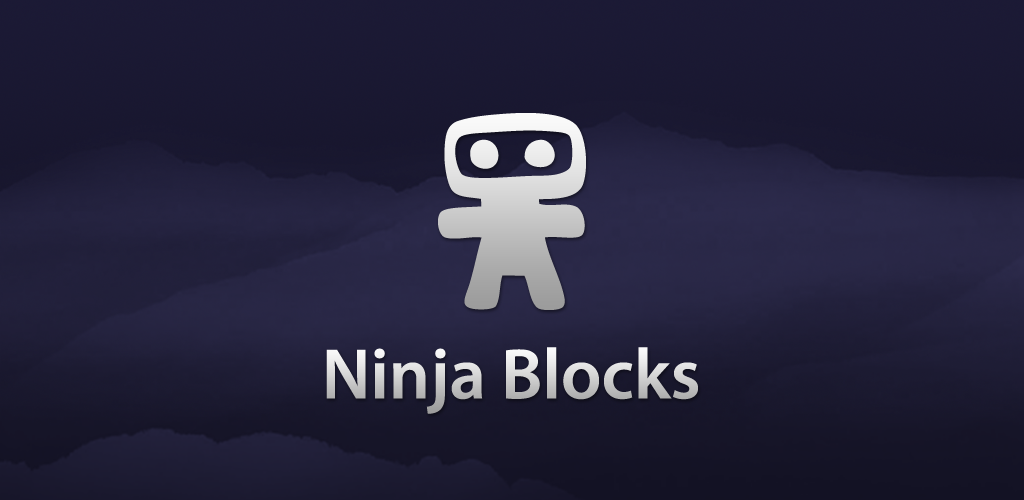
<style>
.page{position:relative;width:1024px;height:500px}
.page>*{position:absolute;margin:0}
.t1{font:72px "MyriadPro-Semibold"}
</style>
<div class="page">
<p class="t1" style="left:326px;top:347px;width:372px;height:67px">Ninja Blocks</p>
</div>
